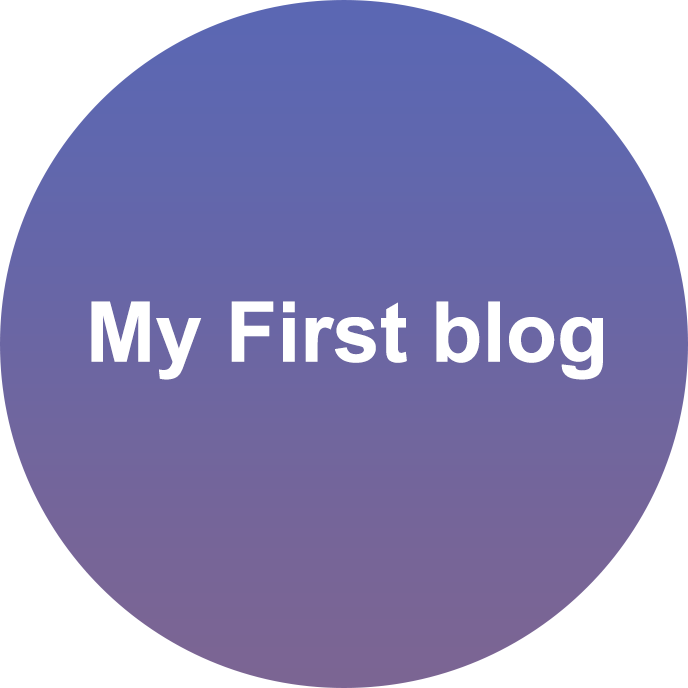
<style>
.page{position:relative;width:688px;height:688px;background:#ffffff}
.page>*{position:absolute;margin:0}
.t1{font:84px "Arial-BoldMT";color:#ffffff}
</style>
<div class="page">
<p class="t1" style="left:91px;top:301px;width:512px;height:79px">My First blog</p>
</div>
